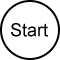
<style>
.page{position:relative;width:60px;height:60px;background:#ffffff}
.page>*{position:absolute;margin:0}
.t1{font:18px "ArialMT";color:#000000}
</style>
<div class="page">
<p class="t1" style="left:11px;top:23px;width:37px;height:14px">Start</p>
</div>
